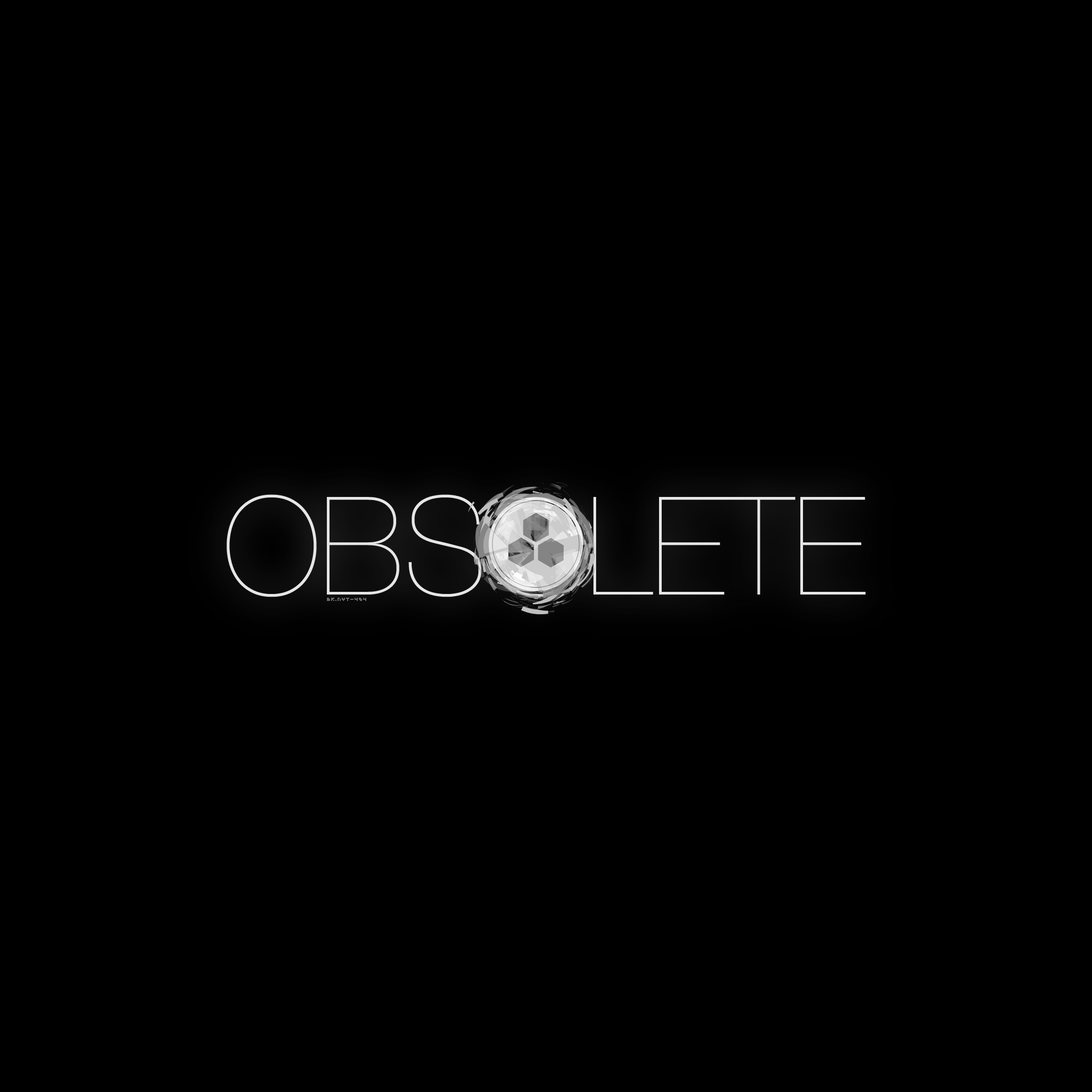
<style>
.page{position:relative;width:1092px;height:1092px;background:#000000}
.page>*{position:absolute;margin:0}
.t1{font:136.5px "HelveticaNeueLTCom-UltLt";color:#e6e6e6}
.t2{font:4.3px "Marvelous-3x3";color:#6c6c6c}
</style>
<div class="page">
<p class="t1" style="left:227px;top:494px;width:639px;height:103px">OBSOLETE</p>
<p class="t2" style="left:327px;top:598px;width:39px;height:3px">gr.nyt-424</p>
</div>
